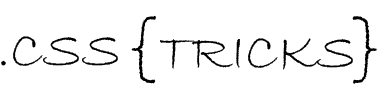
<style>
.page{position:relative;width:377px;height:100px;background:#ffffff}
.page>*{position:absolute;margin:0}
.t1{font:90.1px "BradleyHandITC";color:#000000}
.t2{font:54.1px "BradleyHandITC";color:#000000}
</style>
<div class="page">
<p class="t1" style="left:131px;top:15px;width:25px;height:69px">{</p>
<p class="t1" style="left:352px;top:16px;width:25px;height:68px">}</p>
<p class="t2" style="left:1px;top:36px;width:117px;height:30px">.CSS</p>
<p class="t2" style="left:160px;top:38px;width:193px;height:32px">TRICKS</p>
</div>
